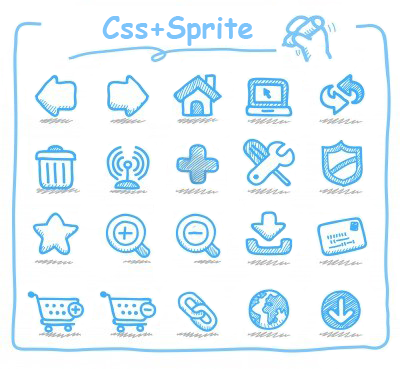
<style>
.page{position:relative;width:400px;height:369px;background:#ffffff}
.page>*{position:absolute;margin:0}
.t1{font:29px "ComicSansMS-Bold";color:#7dc4fa}
</style>
<div class="page">
<p class="t1" style="left:102px;top:16px;width:151px;height:30px">Css+Sprite</p>
</div>
